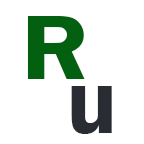
<style>
.page{position:relative;width:144px;height:144px;background:#ffffff}
.page>*{position:absolute;margin:0}
.t1{font:95px "FranklinGothic-Demi";color:#046011;scale:1.09 1}
.t2{font:95px "FranklinGothic-Demi";color:#292c33}
</style>
<div class="page">
<p class="t1" style="left:27px;top:16px;width:58px;height:63px">R</p>
<p class="t2" style="left:71px;top:86px;width:41px;height:48px">u</p>
</div>
